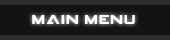
<style>
.page{position:relative;width:170px;height:40px;background:#131313}
.page>*{position:absolute;margin:0}
.t1{font:11px "GAMECUBENDualSet";color:#ffffff}
</style>
<div class="page">
<p class="t1" style="left:32px;top:15px;width:103px;height:9px">MAIN MENU</p>
</div>
